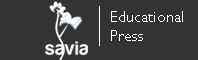
<style>
.page{position:relative;width:198px;height:60px;background:#333333}
.page>*{position:absolute;margin:0}
.t1{font:16px "GillSansMT";color:#ffffff}
</style>
<div class="page">
<p class="t1" style="left:111px;top:11px;width:72px;height:30px">Educational<br>Press</p>
</div>
